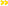
<style>
.page{position:relative;width:8px;height:6px;background:#ffffff}
.page>*{position:absolute;margin:0}
.t1{font:10px "Toonish";color:#ffd600}
</style>
<div class="page">
<p class="t1" style="left:0px;top:0px;width:8px;height:6px">&gt;&gt;</p>
</div>
